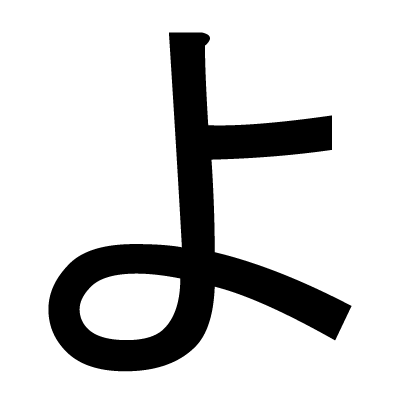
<style>
.page{position:relative;width:400px;height:400px;background:#ffffff}
.page>*{position:absolute;margin:0}
.t1{font:416.7px "MS-PGothic";color:#000000}
</style>
<div class="page">
<p class="t1" style="left:48px;top:32px;width:304px;height:340px">よ</p>
</div>
